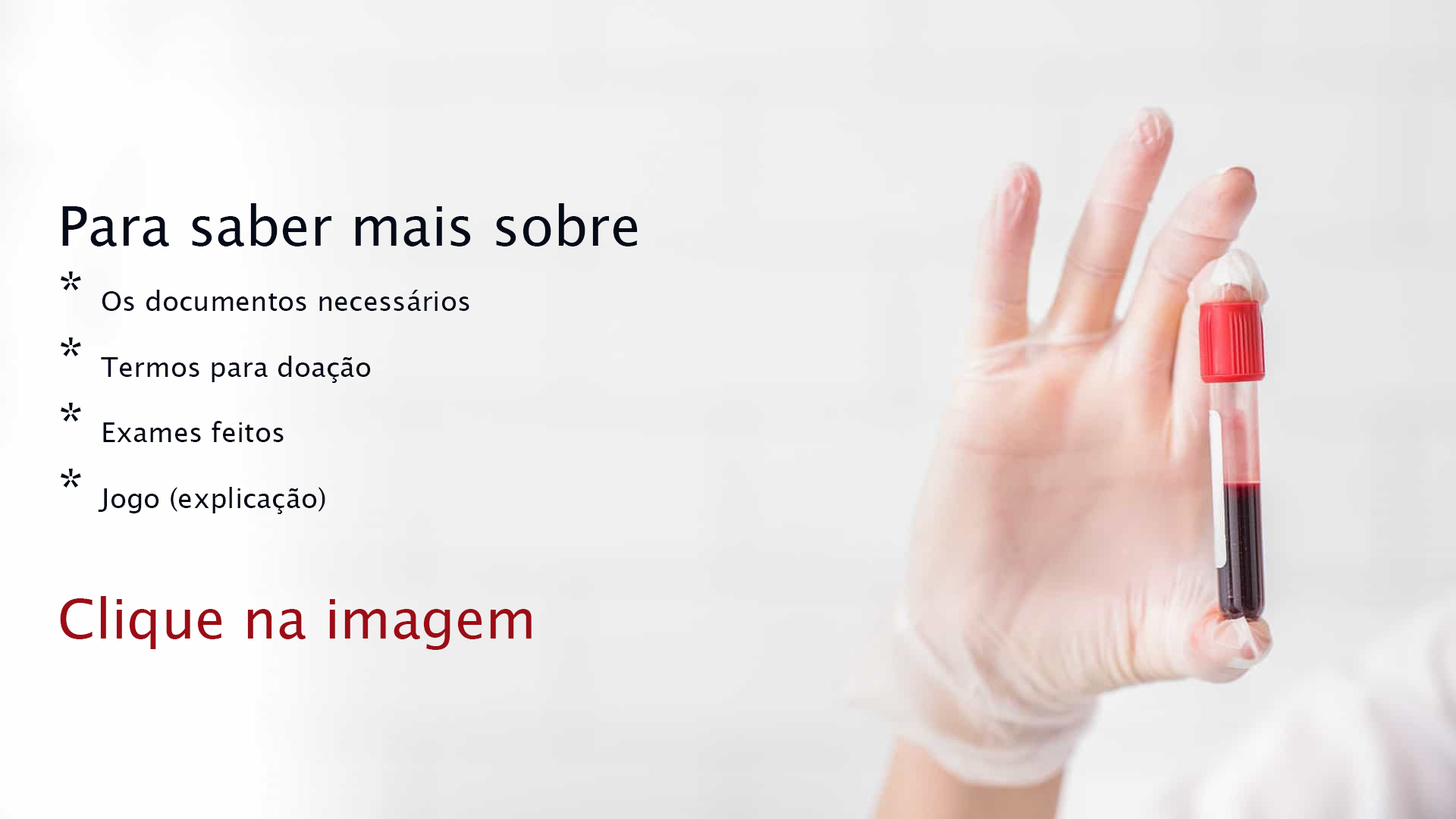
<style>
.page{position:relative;width:1456px;height:819px}
.page>*{position:absolute;margin:0}
.t1{font:27.3px "LucidaSansUnicode";color:#040a18}
.t2{font:54.6px "LucidaSansUnicode";color:#040a18}
.t3{font:54.6px "LucidaSansUnicode";color:#9c0c16}
</style>
<div class="page">
<p class="t1" style="left:60px;top:203px;width:578px;height:447px"><span class="t2">Para saber mais sobre <br>* </span>Os documentos necessários<br><span class="t2">* </span>Termos para doação<br><span class="t2">* </span>Exames feitos<br><span class="t2">* </span>Jogo (explicação)<br><br><span class="t3">Clique na imagem</span></p>
</div>
